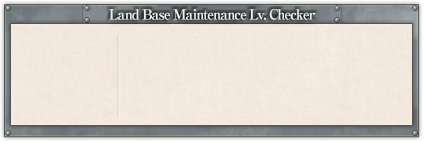
<style>
.page{position:relative;width:424px;height:142px}
.page>*{position:absolute;margin:0}
.t1{font:14px "RyuminPro-ExBold";letter-spacing:-0.08em;color:#f2f0ed}
</style>
<div class="page">
<p class="t1" style="left:109px;top:9px;width:207px;height:11px">Land Base Maintenance Lv. Checker</p>
</div>
